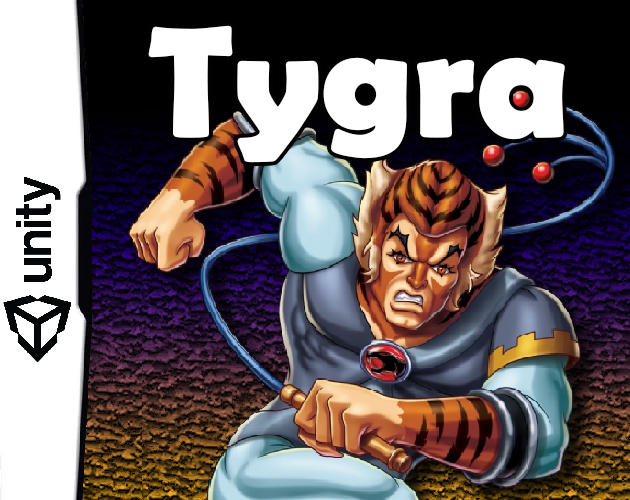
<style>
.page{position:relative;width:630px;height:500px}
.page>*{position:absolute;margin:0}
.t1{font:153.7px "BerlinSansFBDemi-Bold";color:#ffffff;font-weight:bold}
</style>
<div class="page">
<p class="t1" style="left:148px;top:25px;width:417px;height:138px">Tygra</p>
</div>
